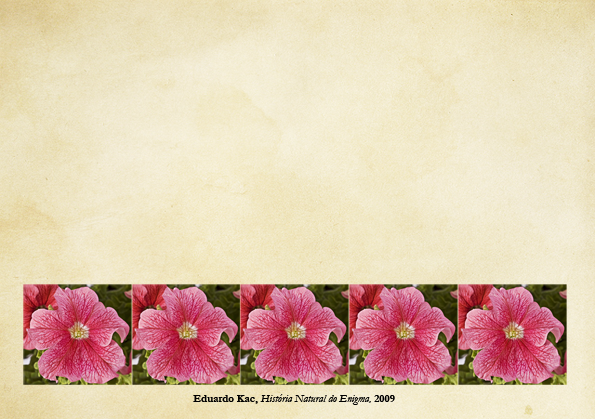
<style>
.page{position:relative;width:595px;height:419px}
.page>*{position:absolute;margin:0}
.t1{font:11px "Garamond-Italic";color:#000000}
.t2{font:11px "Garamond-Bold";color:#000000}
</style>
<div class="page">
<p class="t1" style="left:193px;top:394px;width:202px;height:11px"><span class="t2">Eduardo Kac, </span>História Natural do Enigma,<span class="t2"> 2009</span></p>
</div>
